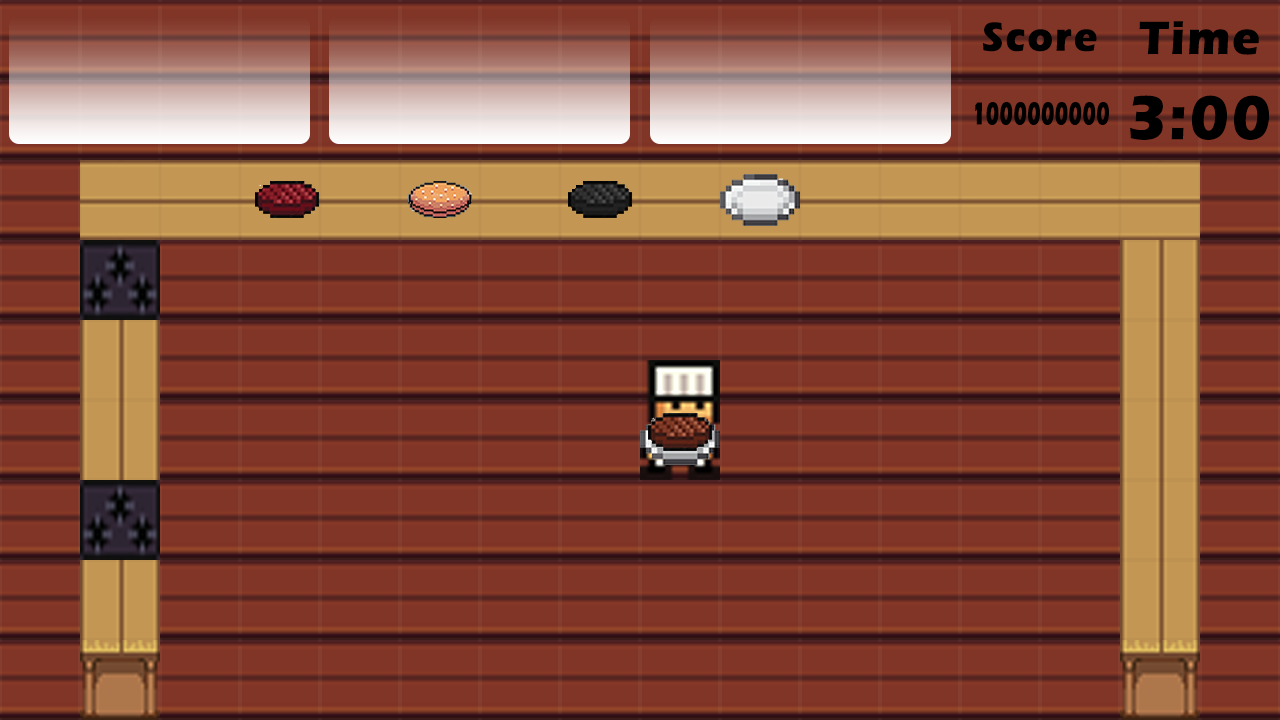
<style>
.page{position:relative;width:1280px;height:720px;background:#803526}
.page>*{position:absolute;margin:0}
.t1{font:41.5px "ErasITC-Bold";letter-spacing:0.025em;color:#000000;font-weight:bold;scale:0.94 1}
.t2{font:47.9px "ErasITC-Bold";letter-spacing:0.025em;color:#000000;font-weight:bold;scale:0.96 1}
.t3{font:32.3px "ErasITC-Bold";letter-spacing:0.025em;color:#000000;font-weight:bold;scale:0.61 1}
.t4{font:63.6px "ErasITC-Bold";letter-spacing:0.025em;color:#000000;font-weight:bold;scale:0.94 1}
</style>
<div class="page">
<p class="t1" style="left:982px;top:22px;width:115px;height:30px">Score</p>
<p class="t2" style="left:1139px;top:21px;width:120px;height:34px">Time</p>
<p class="t3" style="left:975px;top:102px;width:134px;height:23px">1000000000</p>
<p class="t4" style="left:1130px;top:95px;width:139px;height:45px">3:00</p>
</div>
